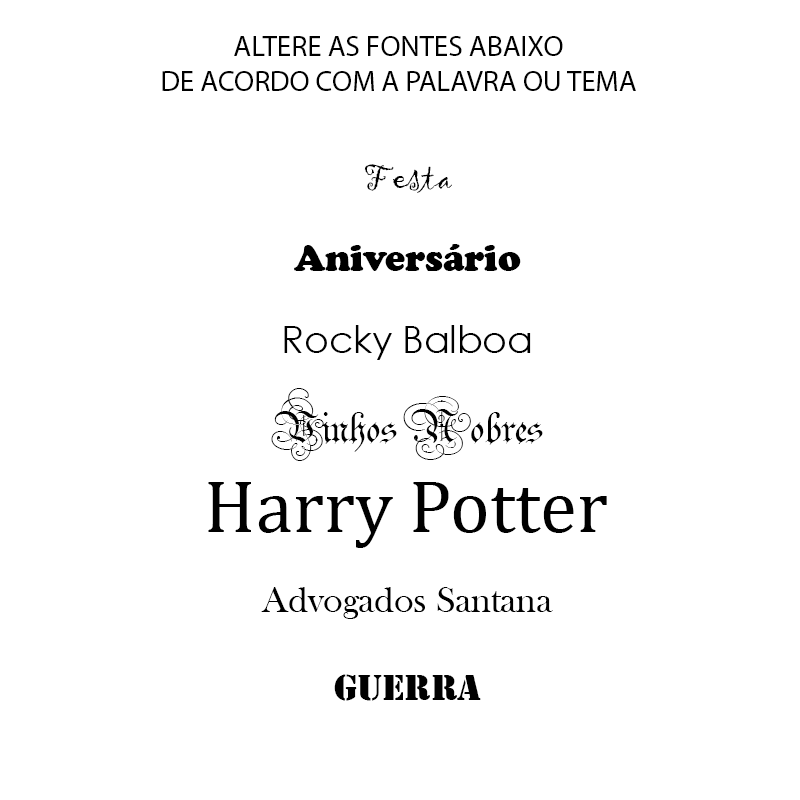
<style>
.page{position:relative;width:800px;height:800px;background:#ffffff}
.page>*{position:absolute;margin:0}
.t1{font:29.2px "MyriadPro-Regular";color:#000000}
.t2{font:37.5px "Gigi-Regular";color:#000000}
.t3{font:37.5px "CooperBlack";color:#000000}
.t4{font:37.5px "CenturyGothic";color:#000000}
.t5{font:75px "Parchment-Regular";color:#000000}
.t6{font:75px "CambriaMath";color:#000000}
.t7{font:37.5px "BaskOldFace";color:#000000}
.t8{font:37.5px "Stencil";color:#000000}
</style>
<div class="page">
<p class="t1" style="left:162px;top:36px;width:474px;height:55px;text-align:center">ALTERE AS FONTES ABAIXO<br>DE ACORDO COM A PALAVRA OU TEMA</p>
<p class="t2" style="left:364px;top:164px;width:88px;height:29px">Festa</p>
<p class="t3" style="left:294px;top:244px;width:227px;height:27px">Aniversário</p>
<p class="t4" style="left:284px;top:325px;width:247px;height:35px">Rocky Balboa</p>
<p class="t5" style="left:271px;top:388px;width:272px;height:73px">Vinhos Nobres</p>
<p class="t6" style="left:208px;top:482px;width:399px;height:66px">Harry Potter</p>
<p class="t7" style="left:261px;top:587px;width:292px;height:32px">Advogados Santana</p>
<p class="t8" style="left:334px;top:674px;width:147px;height:27px">Guerra</p>
</div>
